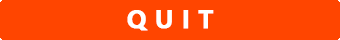
<style>
.page{position:relative;width:340px;height:40px;background:#ff4500}
.page>*{position:absolute;margin:0}
.t1{font:24px "MicrosoftYaHei-Bold";color:#ffffff;font-weight:bold}
</style>
<div class="page">
<p class="t1" style="left:127px;top:10px;width:87px;height:21px">Q U I T</p>
</div>
